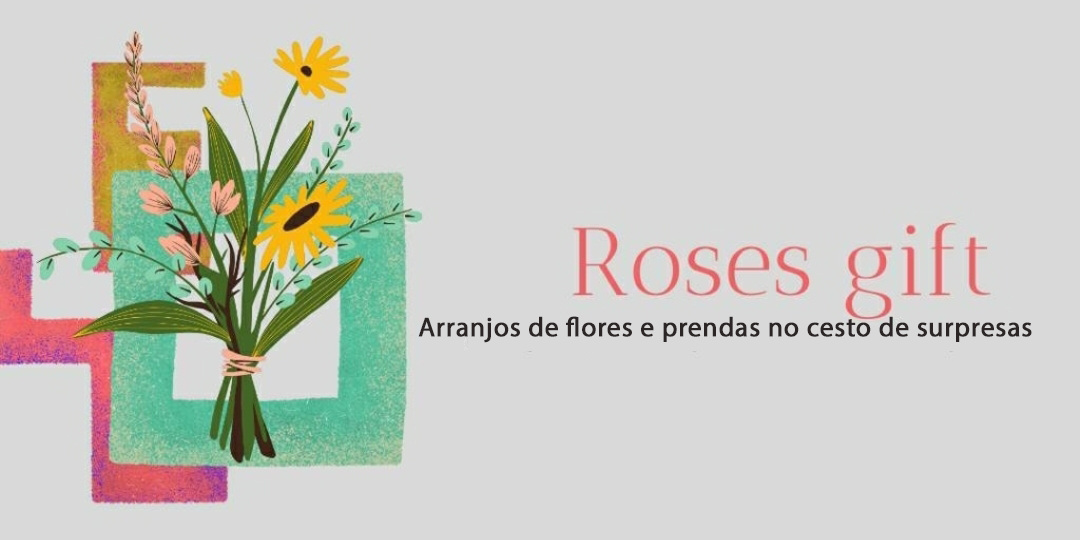
<style>
.page{position:relative;width:1080px;height:540px;background:#d9d9d9}
.page>*{position:absolute;margin:0}
.t1{font:27.3px "MyriadPro-Regular";letter-spacing:0.01em;color:#2b2525;font-weight:bold}
</style>
<div class="page">
<p class="t1" style="left:418px;top:316px;width:614px;height:27px">Arranjos de flores e prendas no cesto de surpresas</p>
</div>
